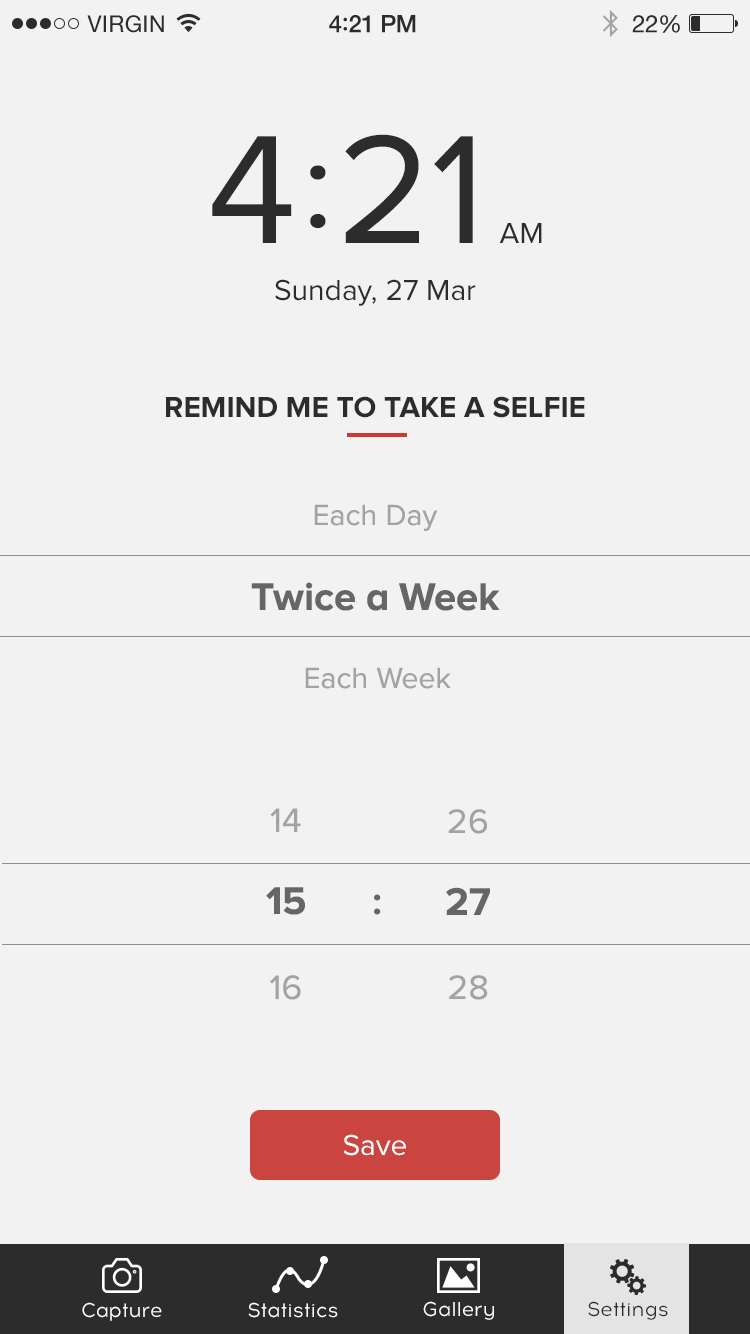
<style>
.page{position:relative;width:750px;height:1334px;background:#f2f2f2}
.page>*{position:absolute;margin:0}
.t1{font:23px "HelveticaNeue";letter-spacing:0.02em;color:#2c2c2c}
.t2{font:24px "HelveticaNeue-Medium";letter-spacing:-0.02em;color:#2c2c2c}
.t3{font:26px "Avenir-Medium";letter-spacing:-0.02em;color:#2c2c2c}
.t4{font:24px "HelveticaNeue";letter-spacing:-0.02em;color:#2c2c2c}
.t5{font:160px "ProximaNova-Regular";color:#2c2c2c}
.t6{font:160px "Acrom-Regular";color:#2c2c2c}
.t7{font:30px "ProximaNova-Regular";color:#2c2c2c}
.t8{font:30px "ProximaNovaA-Bold";color:#2c2c2c;text-transform:uppercase}
.t9{font:30px "ProximaNova-Regular";color:#a3a3a3}
.t10{font:40px "ProximaNovaA-Bold";color:#666666}
.t11{font:35px "ProximaNova-Regular";color:#a3a3a3}
.t12{font:30px "ProximaNova-Regular";color:#ffffff}
.t13{font:20px "Acrom-Regular";color:#ffffff}
.t14{font:20px "Acrom-Regular";color:#2c2c2c}
</style>
<div class="page">
<p class="t1" style="left:87px;top:15px;width:77px;height:18px">VIRGIN</p>
<p class="t2" style="left:329px;top:15px;width:87px;height:18px">4<span class="t3">:</span>21 PM</p>
<p class="t4" style="left:632px;top:15px;width:48px;height:18px">22%</p>
<p class="t5" style="left:212px;top:134px;width:261px;height:109px">4 21</p>
<p class="t6" style="left:310px;top:165px;width:16px;height:63px">:</p>
<p class="t7" style="left:499px;top:223px;width:43px;height:20px">AM</p>
<p class="t7" style="left:275px;top:279px;width:201px;height:27px">Sunday, 27 Mar</p>
<p class="t8" style="left:166px;top:396px;width:419px;height:22px">Remind me to take a selfie</p>
<p class="t9" style="left:314px;top:504px;width:124px;height:27px">Each Day</p>
<p class="t10" style="left:251px;top:582px;width:249px;height:29px">Twice a Week</p>
<p class="t9" style="left:305px;top:667px;width:146px;height:22px">Each Week</p>
<p class="t11" style="left:270px;top:808px;width:31px;height:24px">14</p>
<p class="t11" style="left:448px;top:809px;width:39px;height:25px">26</p>
<p class="t10" style="left:266px;top:887px;width:39px;height:28px">15</p>
<p class="t10" style="left:374px;top:894px;width:7px;height:21px">:</p>
<p class="t10" style="left:446px;top:887px;width:44px;height:28px">27</p>
<p class="t11" style="left:270px;top:975px;width:31px;height:25px">16</p>
<p class="t11" style="left:449px;top:975px;width:39px;height:25px">28</p>
<p class="t12" style="left:343px;top:1134px;width:63px;height:22px">Save</p>
<p class="t13" style="left:82px;top:1302px;width:80px;height:19px">Capture</p>
<p class="t13" style="left:248px;top:1302px;width:90px;height:16px">Statistics</p>
<p class="t13" style="left:423px;top:1301px;width:71px;height:19px">Gallery</p>
<p class="t14" style="left:588px;top:1301px;width:80px;height:19px">Settings</p>
</div>
